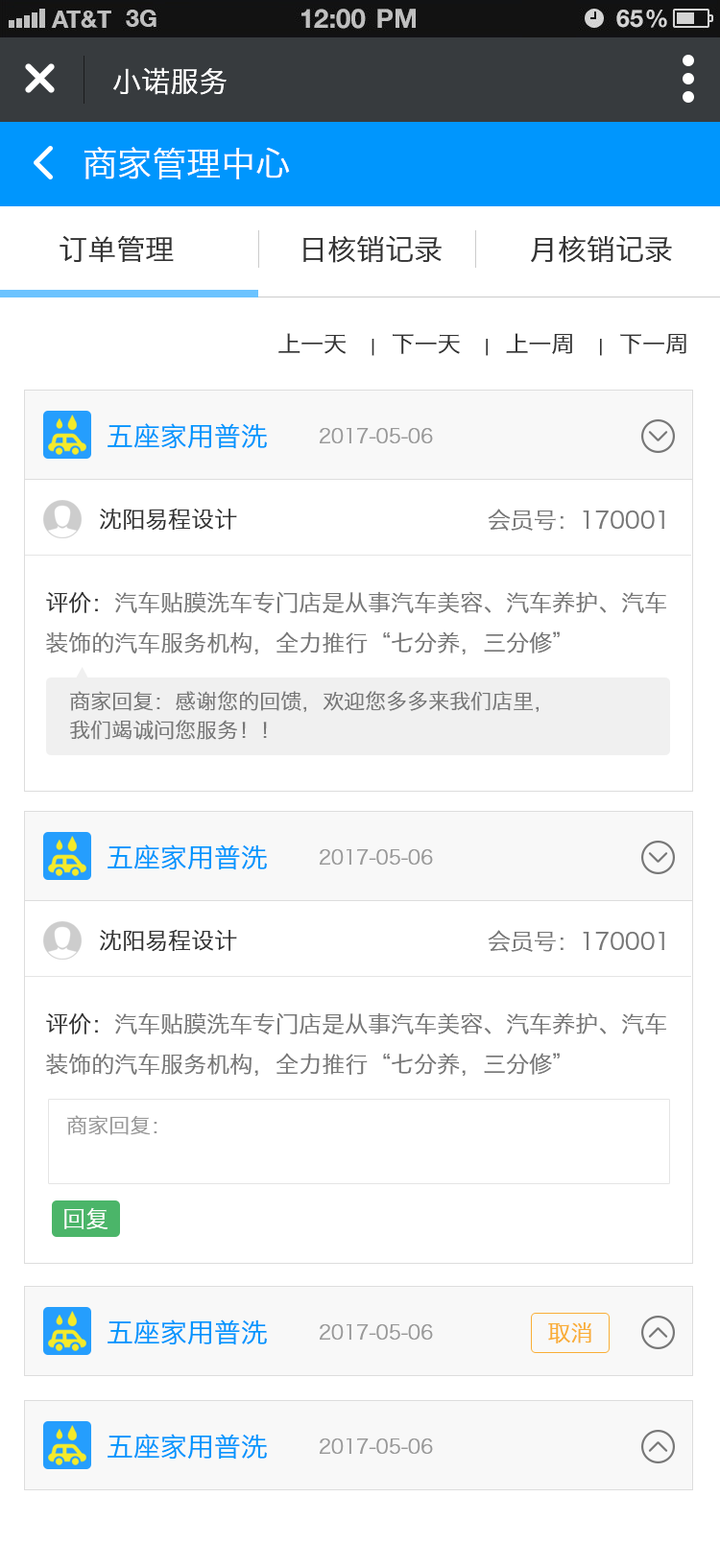
<style>
.page{position:relative;width:720px;height:1568px;background:#ffffff}
.page>*{position:absolute;margin:0}
.t1{font:28.8px "HiraginoSansGB-W3";color:#ffffff}
.t2{font:34.5px "HiraginoSansGB-W3";color:#ffffff}
.t3{font:28.8px "HiraginoSansGB-W3";color:#333333}
.t4{font:23px "HiraginoSansGB-W3";color:#333333}
.t5{font:17.3px "HiraginoSansGB-W3";color:#333333}
.t6{font:26.9px "HiraginoSansGB-W3";color:#0096fd}
.t7{font:19.2px "HiraginoSansGB-W3";color:#999999}
.t8{font:23px "HiraginoSansGB-W3";color:#777777}
.t9{font:21.1px/28.8px "HiraginoSansGB-W3";color:#777777}
.t10{font:21.1px "HiraginoSansGB-W3";color:#999999}
.t11{font:23px "HiraginoSansGB-W3";color:#ffffff}
.t12{font:23px "HiraginoSansGB-W3";color:#f9ae37}
</style>
<div class="page">
<p class="t1" style="left:113px;top:67px;width:113px;height:28px">小诺服务</p>
<p class="t2" style="left:84px;top:147px;width:206px;height:32px">商家管理中心</p>
<p class="t3" style="left:59px;top:235px;width:613px;height:28px">订单管理             日核销记录         月核销记录</p>
<p class="t4" style="left:278px;top:333px;width:408px;height:23px">上一天   <span class="t5">|</span>  下一天   <span class="t5">|</span>  上一周   <span class="t5">|</span>  下一周</p>
<p class="t6" style="left:107px;top:423px;width:160px;height:26px">五座家用普洗</p>
<p class="t7" style="left:320px;top:428px;width:113px;height:15px">2017-05-06</p>
<p class="t4" style="left:100px;top:508px;width:137px;height:23px">沈阳易程设计</p>
<p class="t8" style="left:487px;top:509px;width:177px;height:22px">会员号：170001</p>
<p class="t8" style="left:46px;top:591px;width:620px;height:63px"><span class="t4">评价：</span>汽车贴膜洗车专门店是从事汽车美容、汽车养护、汽车<br>装饰的汽车服务机构，全力推行“七分养，三分修”</p>
<p class="t9" style="left:70px;top:691px;width:468px;height:49px">商家回复：感谢您的回馈，欢迎您多多来我们店里，<br>我们竭诚问您服务！！</p>
<p class="t6" style="left:107px;top:844px;width:160px;height:26px">五座家用普洗</p>
<p class="t7" style="left:320px;top:849px;width:113px;height:16px">2017-05-06</p>
<p class="t4" style="left:100px;top:929px;width:137px;height:23px">沈阳易程设计</p>
<p class="t8" style="left:487px;top:930px;width:177px;height:22px">会员号：170001</p>
<p class="t8" style="left:46px;top:1012px;width:620px;height:64px"><span class="t4">评价：</span>汽车贴膜洗车专门店是从事汽车美容、汽车养护、汽车<br>装饰的汽车服务机构，全力推行“七分养，三分修”</p>
<p class="t10" style="left:67px;top:1115px;width:90px;height:20px">商家回复：</p>
<p class="t11" style="left:64px;top:1207px;width:44px;height:22px">回复</p>
<p class="t6" style="left:107px;top:1319px;width:160px;height:26px">五座家用普洗</p>
<p class="t7" style="left:320px;top:1324px;width:113px;height:16px">2017-05-06</p>
<p class="t12" style="left:548px;top:1322px;width:43px;height:21px">取消</p>
<p class="t6" style="left:107px;top:1434px;width:160px;height:26px">五座家用普洗</p>
<p class="t7" style="left:320px;top:1438px;width:113px;height:16px">2017-05-06</p>
</div>
